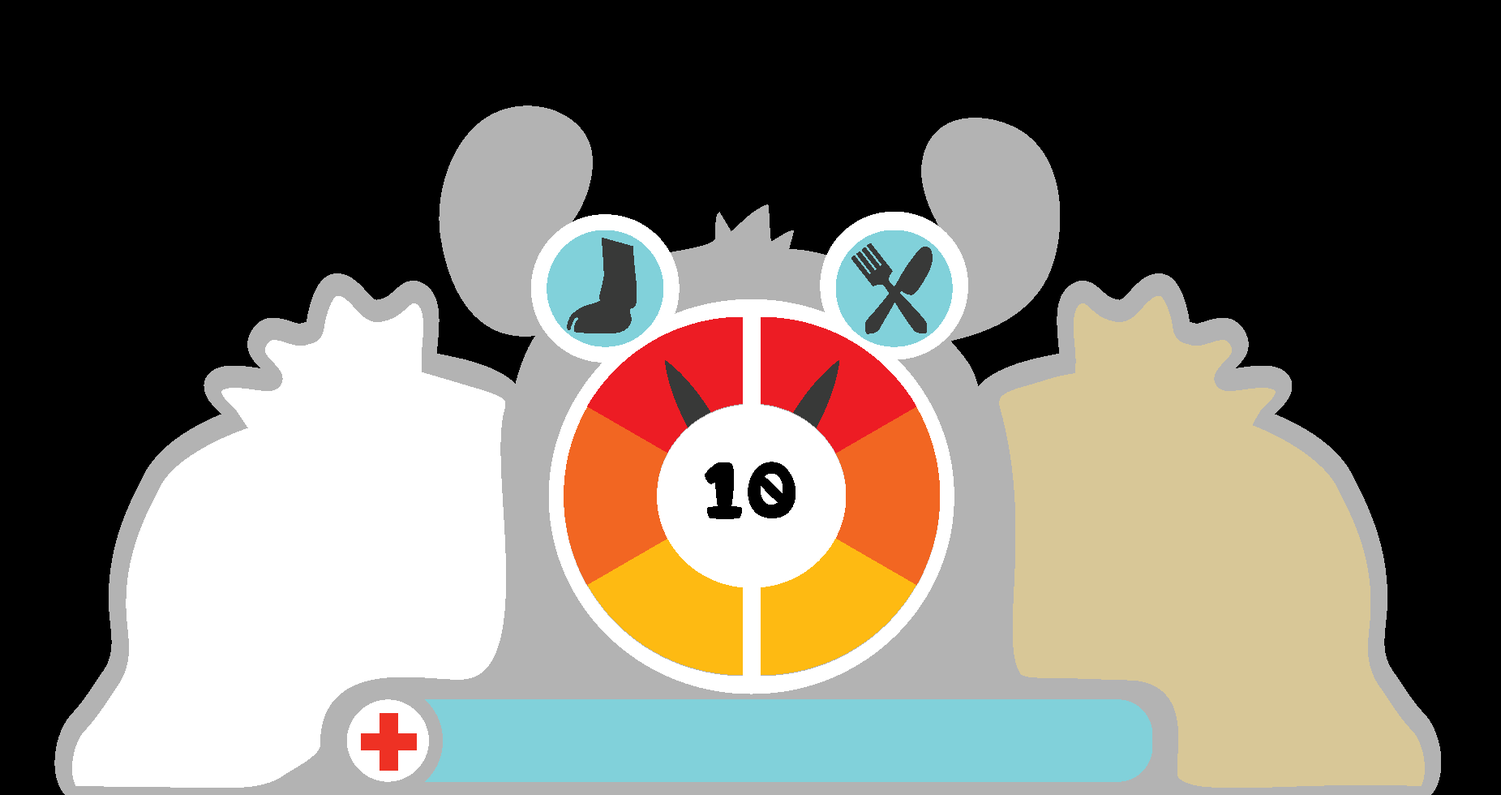
<style>
.page{position:relative;width:1501px;height:795px;background:#000000}
.page>*{position:absolute;margin:0}
.t1{font:101.3px "Hurly-Burly";color:#000000}
</style>
<div class="page">
<p class="t1" style="left:705px;top:461px;width:90px;height:58px">10</p>
</div>
